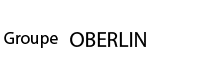
<style>
.page{position:relative;width:210px;height:70px;background:#ffffff}
.page>*{position:absolute;margin:0}
.t1{font:17.2px "MyriadPro-Regular";color:#000000}
.t2{font:21.5px "MyriadPro-Regular";color:#000000}
</style>
<div class="page">
<p class="t1" style="left:4px;top:32px;width:54px;height:16px">Groupe</p>
<p class="t2" style="left:70px;top:32px;width:76px;height:15px">OBERLIN</p>
</div>
